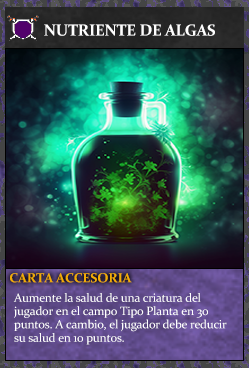
<style>
.page{position:relative;width:249px;height:368px}
.page>*{position:absolute;margin:0}
.t1{font:16px "Constantia-Bold";letter-spacing:-0.02em;color:#ffffff}
.t2{font:13.3px "Constantia-Bold";letter-spacing:-0.02em;color:#f2ac05}
.t3{font:12px/13.3px "Constantia";letter-spacing:-0.02em;color:#ffffff}
</style>
<div class="page">
<p class="t1" style="left:44px;top:24px;width:171px;height:12px">NUTRIENTE DE ALGAS</p>
<p class="t2" style="left:10px;top:273px;width:122px;height:10px">CARTA ACCESORIA</p>
<p class="t3" style="left:13px;top:293px;width:214px;height:52px">Aumente la salud de una criatura del<br>jugador en el campo Tipo Planta en 30<br>puntos. A cambio, el jugador debe reducir<br>su salud en 10 puntos.</p>
</div>
